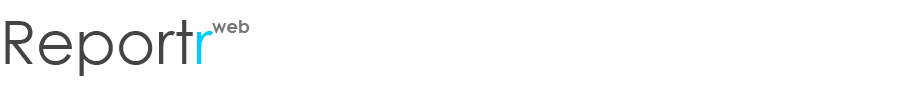
<style>
.page{position:relative;width:900px;height:100px;background:#ffffff}
.page>*{position:absolute;margin:0}
.t1{font:60px "CenturyGothic";color:#444444}
.t2{font:60px "CenturyGothic";color:#00ccff}
.t3{font:18px "CenturyGothic-Bold";color:#777777}
</style>
<div class="page">
<p class="t1" style="left:5px;top:20px;width:208px;height:56px">Report<span class="t2">r</span></p>
<p class="t3" style="left:212px;top:20px;width:38px;height:13px">web</p>
</div>
